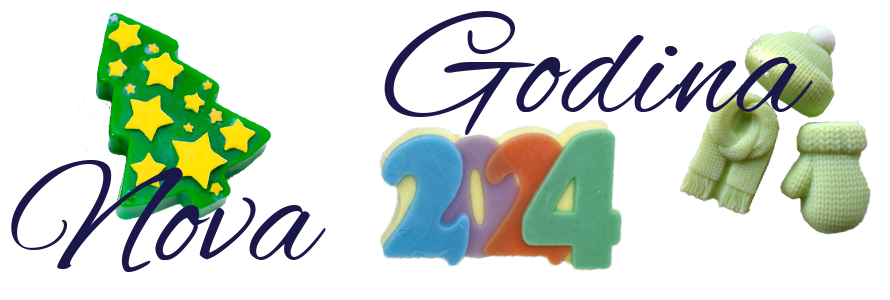
<style>
.page{position:relative;width:890px;height:300px;background:#ffffff}
.page>*{position:absolute;margin:0}
.t1{font:156px "AlexBrush-Regular";letter-spacing:0.01em;color:#1b174b}
</style>
<div class="page">
<p class="t1" style="left:384px;top:11px;width:429px;height:124px">Godina</p>
<p class="t1" style="left:11px;top:160px;width:315px;height:112px">Nova</p>
</div>
